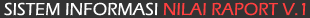
<style>
.page{position:relative;width:310px;height:18px;background:#333333}
.page>*{position:absolute;margin:0}
.t1{font:18px "ErasITC-Medium";color:#ffffff}
.t2{font:18px "ErasITC-Medium";color:#ff3f3f}
</style>
<div class="page">
<p class="t1" style="left:4px;top:2px;width:302px;height:14px">SISTEM INFORMASI <span class="t2">NILAI RAPORT V.1</span></p>
</div>
